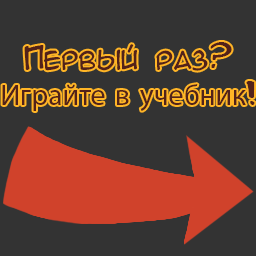
<style>
.page{position:relative;width:256px;height:256px;background:#333333}
.page>*{position:absolute;margin:0}
.t1{font:29.7px "MyriadPro-Regular";color:#52221a}
.t2{font:29.7px "AnimeAcev3";color:#52221a}
.t3{font:29.7px "ConformityNormal";color:#52221a}
</style>
<div class="page">
<p class="t1" style="left:2px;top:42px;width:253px;height:69px;text-align:center"><span class="t2">Первый раз?<br></span>Играйте в учебник<span class="t3">!</span></p>
</div>
